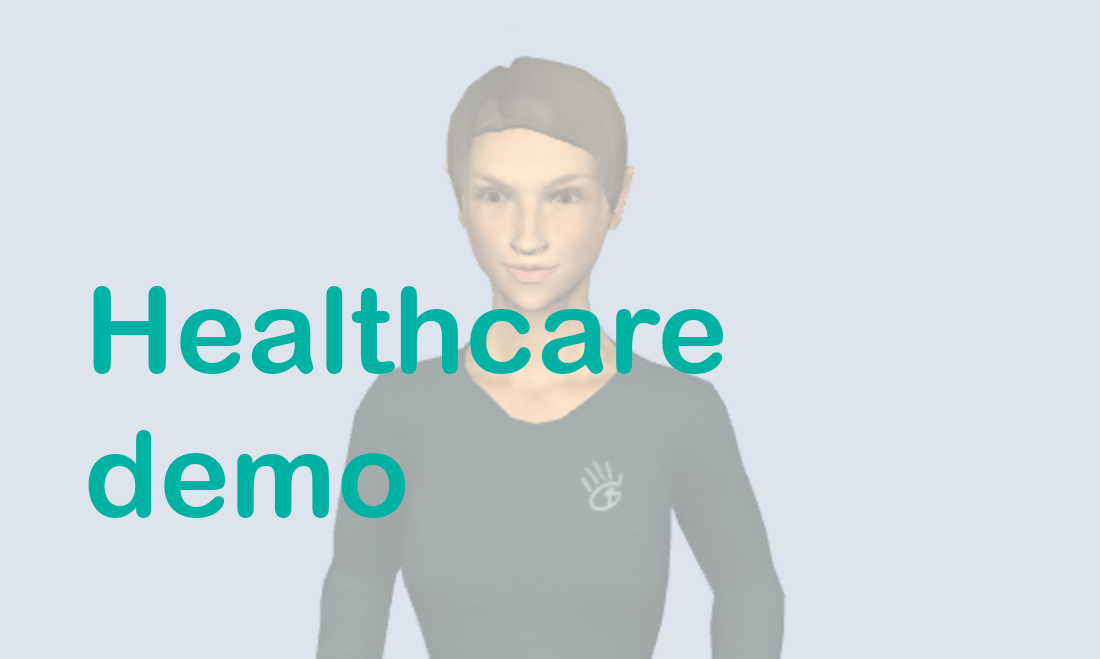
<style>
.page{position:relative;width:1100px;height:659px;background:#dee4ed}
.page>*{position:absolute;margin:0}
.t1{font:120px "ArialRoundedMTBold";color:#00b2a4}
</style>
<div class="page">
<p class="t1" style="left:88px;top:286px;width:636px;height:232px">Healthcare<br>demo</p>
</div>
